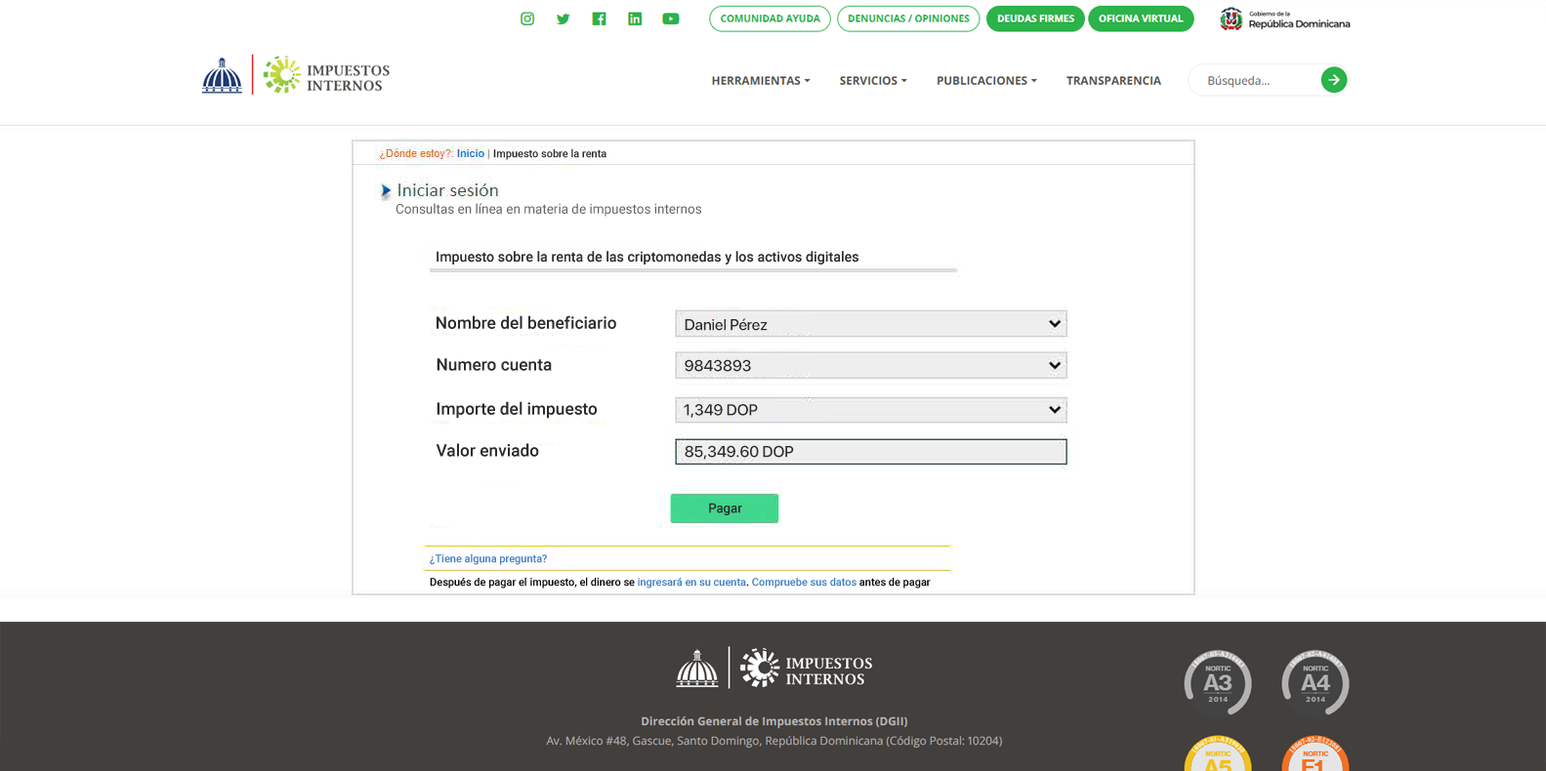
<style>
.page{position:relative;width:1546px;height:771px;background:#ffffff}
.page>*{position:absolute;margin:0}
.t1{font:10.7px "Roboto-Medium";color:#2c2c2c}
.t2{font:13.2px "Roboto-Regular";color:#646464}
.t3{font:13.9px "Roboto-Medium";color:#2c2c2c}
.t4{font:16.9px "Roboto-Medium";color:#2c2c2c}
.t5{font:15.6px "SFProDisplay-Medium";color:#2c2c2c}
.t6{font:12.8px "Roboto-Medium";color:#2b2b2b}
.t7{font:10.7px "Roboto-Medium";color:#3d7dbf}
.t8{font:10.7px "Roboto-Medium";color:#05040a}
</style>
<div class="page">
<p class="t1" style="left:493px;top:148px;width:113px;height:12px">Impuesto sobre la renta</p>
<p class="t2" style="left:395px;top:203px;width:306px;height:14px">Consultas en línea en materia de impuestos internos</p>
<p class="t3" style="left:436px;top:251px;width:422px;height:14px">Impuesto sobre la renta de las criptomonedas y los activos digitales</p>
<p class="t4" style="left:436px;top:315px;width:180px;height:14px">Nombre del beneficiario</p>
<p class="t5" style="left:685px;top:318px;width:83px;height:13px">Daniel Pérez</p>
<p class="t4" style="left:436px;top:358px;width:116px;height:13px">Numero cuenta</p>
<p class="t5" style="left:685px;top:359px;width:66px;height:13px">9843893</p>
<p class="t4" style="left:436px;top:401px;width:161px;height:18px">Importe del impuesto</p>
<p class="t5" style="left:684px;top:404px;width:74px;height:14px">1,349 DOP</p>
<p class="t4" style="left:436px;top:443px;width:103px;height:14px">Valor enviado</p>
<p class="t5" style="left:685px;top:445px;width:109px;height:15px">85,349.60 DOP</p>
<p class="t6" style="left:709px;top:503px;width:33px;height:13px">Pagar</p>
<p class="t7" style="left:430px;top:554px;width:117px;height:11px">¿Tiene alguna pregunta?</p>
<p class="t8" style="left:430px;top:577px;width:501px;height:12px">Después de pagar el impuesto, el dinero se <span class="t7">ingresará en su cuenta</span>. <span class="t7">Compruebe sus datos</span> antes de pagar</p>
</div>
